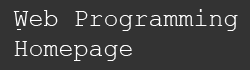
<style>
.page{position:relative;width:250px;height:70px;background:#333333}
.page>*{position:absolute;margin:0}
.t1{font:25px "CourierNewPSMT";color:#ffffff}
</style>
<div class="page">
<p class="t1" style="left:13px;top:9px;width:225px;height:52px">Web Programming<br>Homepage</p>
</div>
